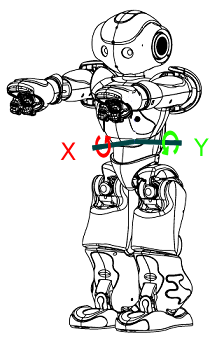
<style>
.page{position:relative;width:224px;height:343px;background:#ffffff}
.page>*{position:absolute;margin:0}
.t1{font:24px "DejaVuSans";color:#ff0000}
.t2{font:24px "DejaVuSans";color:#1dff00}
</style>
<div class="page">
<p class="t1" style="left:60px;top:142px;width:16px;height:18px">X</p>
<p class="t2" style="left:193px;top:138px;width:16px;height:18px">Y</p>
</div>
